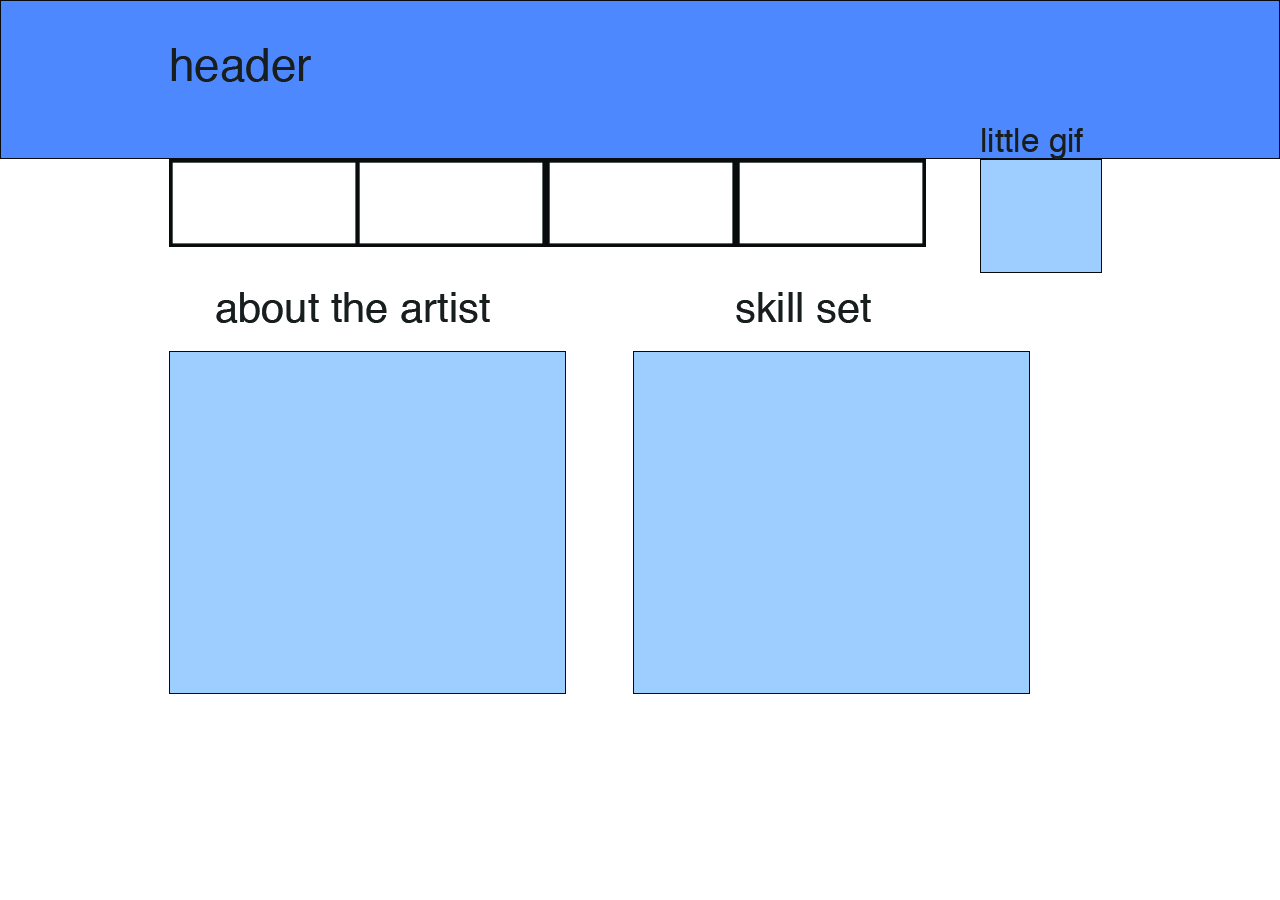
<style>
.page{position:relative;width:1280px;height:900px;background:#ffffff}
.page>*{position:absolute;margin:0}
.t1{font:45.8px "Helvetica";color:#181d1e}
.t2{font:33.3px "Helvetica";color:#181d1e}
.t3{font:41.7px "Helvetica";color:#181d1e}
</style>
<div class="page">
<p class="t1" style="left:171px;top:48px;width:140px;height:34px">header</p>
<p class="t2" style="left:982px;top:128px;width:101px;height:31px">little gif</p>
<p class="t3" style="left:216px;top:292px;width:274px;height:31px">about the artist</p>
<p class="t3" style="left:736px;top:292px;width:135px;height:31px">skill set</p>
</div>
